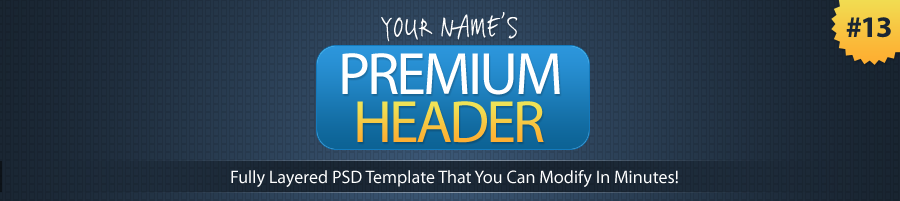
<style>
.page{position:relative;width:900px;height:201px}
.page>*{position:absolute;margin:0}
.t1{font:30px "VincHand";color:#ffffff;text-transform:uppercase}
.t2{font:30px "MyriadPro-Bold";letter-spacing:-0.05em;color:#1a2634}
.t3{font:60px "MyriadPro-Regular";letter-spacing:-0.05em;color:#ffffff;text-transform:uppercase}
.t4{font:60px "MyriadPro-Regular";letter-spacing:-0.05em;text-transform:uppercase}
.t5{font:18px "MyriadPro-Regular";color:#ffffff}
</style>
<div class="page">
<p class="t1" style="left:381px;top:12px;width:137px;height:30px">Your Name’s</p>
<p class="t2" style="left:846px;top:17px;width:45px;height:21px">#13</p>
<p class="t3" style="left:342px;top:53px;width:218px;height:42px">Premium</p>
<p class="t4" style="left:357px;top:101px;width:187px;height:42px">Header</p>
<p class="t5" style="left:231px;top:170px;width:447px;height:17px">Fully Layered PSD Template That You Can Modify In Minutes!</p>
</div>
